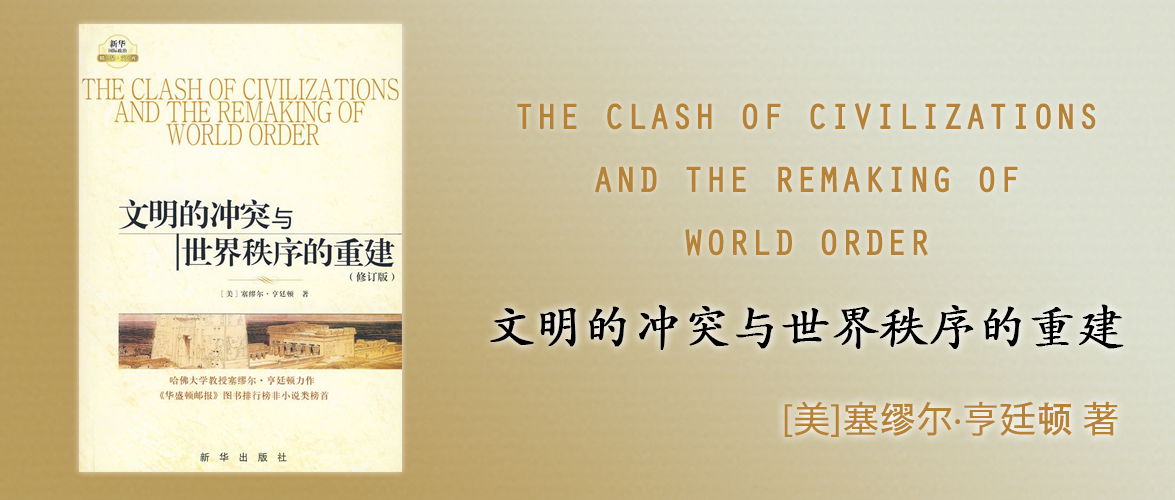
<style>
.page{position:relative;width:1175px;height:500px}
.page>*{position:absolute;margin:0}
.t1{font:36px "OratorStd";color:#b68236;font-weight:bold}
.t2{font:48px "STKaiti";color:#000000;font-weight:bold}
.t3{font:36px "KozGoPr6N-Regular";color:#b68236;font-weight:bold}
.t4{font:36px "AdobeHeitiStd-Regular";color:#b68236;font-weight:bold}
</style>
<div class="page">
<p class="t1" style="left:517px;top:103px;width:579px;height:153px;text-align:center">THE CLASH OF CIVILIZATIONS<br>AND THE REMAKING OF<br>WORLD ORDER</p>
<p class="t2" style="left:490px;top:304px;width:634px;height:46px">文明的冲突与世界秩序的重建</p>
<p class="t3" style="left:784px;top:401px;width:334px;height:36px">[美]塞<span class="t4">缪</span>尔·亨廷<span class="t4">顿</span> 著</p>
</div>
